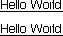
<style>
.page{position:relative;width:63px;height:36px;background:#ffffff}
.page>*{position:absolute;margin:0}
.t1{font:12px/24px "Helvetica";color:#000000;text-decoration:underline}
</style>
<div class="page">
<p class="t1" style="left:0px;top:0px;width:63px;height:36px">Hello World<br>Hello World</p>
</div>
